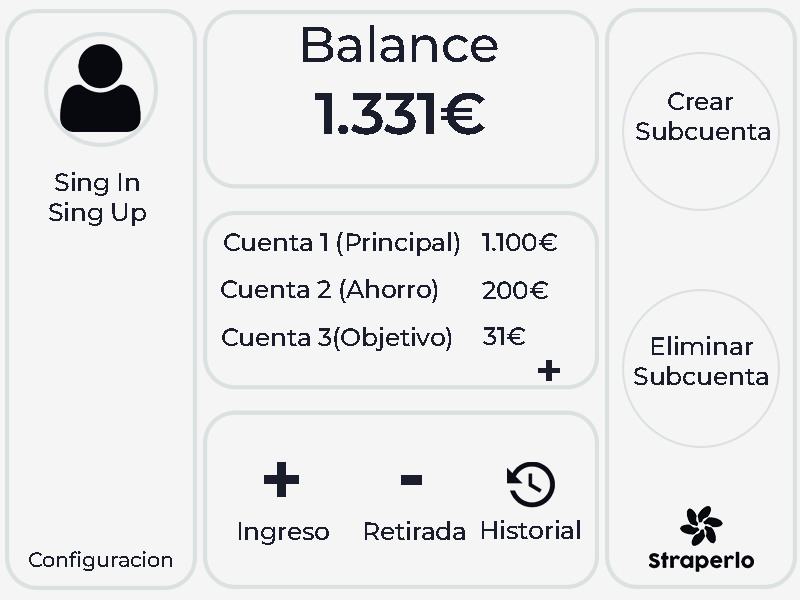
<style>
.page{position:relative;width:800px;height:600px;background:#f5f5f6}
.page>*{position:absolute;margin:0}
.t1{font:50px "MontserratRoman-Medium";letter-spacing:-0.01em;color:#1a1e2b}
.t2{font:58.3px "MontserratRoman-SemiBold";letter-spacing:-0.01em;color:#1a1e2b}
.t3{font:25px "MontserratRoman-Medium";letter-spacing:-0.01em;color:#1a1e2b}
.t4{font:47.2px "MontserratRoman-Bold";letter-spacing:-0.01em;color:#1a1e2b}
.t5{font:75px "MontserratRoman-Bold";letter-spacing:-0.01em;color:#1a1e2b}
.t6{font:20.8px "MontserratRoman-Medium";letter-spacing:-0.01em;color:#1a1e2b}
</style>
<div class="page">
<p class="t1" style="left:303px;top:25px;width:195px;height:37px">Balance</p>
<p class="t2" style="left:315px;top:93px;width:170px;height:42px">1.331€</p>
<p class="t3" style="left:636px;top:92px;width:134px;height:48px;text-align:center">Crear <br>Subcuenta</p>
<p class="t3" style="left:636px;top:92px;width:134px;height:48px;text-align:center">Crear <br>Subcuenta</p>
<p class="t3" style="left:49px;top:172px;width:97px;height:54px;text-align:center">Sing In<br>Sing Up</p>
<p class="t3" style="left:224px;top:232px;width:235px;height:24px">Cuenta 1 (Principal)</p>
<p class="t3" style="left:482px;top:233px;width:75px;height:18px">1.100€</p>
<p class="t3" style="left:221px;top:279px;width:216px;height:24px">Cuenta 2 (Ahorro)</p>
<p class="t3" style="left:482px;top:281px;width:66px;height:18px">200€</p>
<p class="t3" style="left:222px;top:327px;width:229px;height:24px">Cuenta 3(Objetivo)</p>
<p class="t3" style="left:483px;top:327px;width:42px;height:18px">31€</p>
<p class="t3" style="left:634px;top:336px;width:134px;height:49px;text-align:center">Eliminar<br>Subcuenta</p>
<p class="t4" style="left:538px;top:360px;width:22px;height:21px">+</p>
<p class="t5" style="left:264px;top:462px;width:35px;height:35px">+</p>
<p class="t3" style="left:365px;top:521px;width:100px;height:19px">Retirada</p>
<p class="t3" style="left:482px;top:520px;width:98px;height:19px">Historial</p>
<p class="t3" style="left:239px;top:522px;width:90px;height:23px">Ingreso</p>
<p class="t6" style="left:29px;top:551px;width:143px;height:20px">Configuracion</p>
</div>
